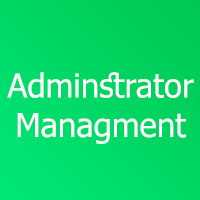
<style>
.page{position:relative;width:200px;height:200px}
.page>*{position:absolute;margin:0}
.t1{font:32.9px "Tahoma";color:#ffffff}
</style>
<div class="page">
<p class="t1" style="left:7px;top:72px;width:187px;height:72px;text-align:center">Adminstrator<br>Managment</p>
</div>
